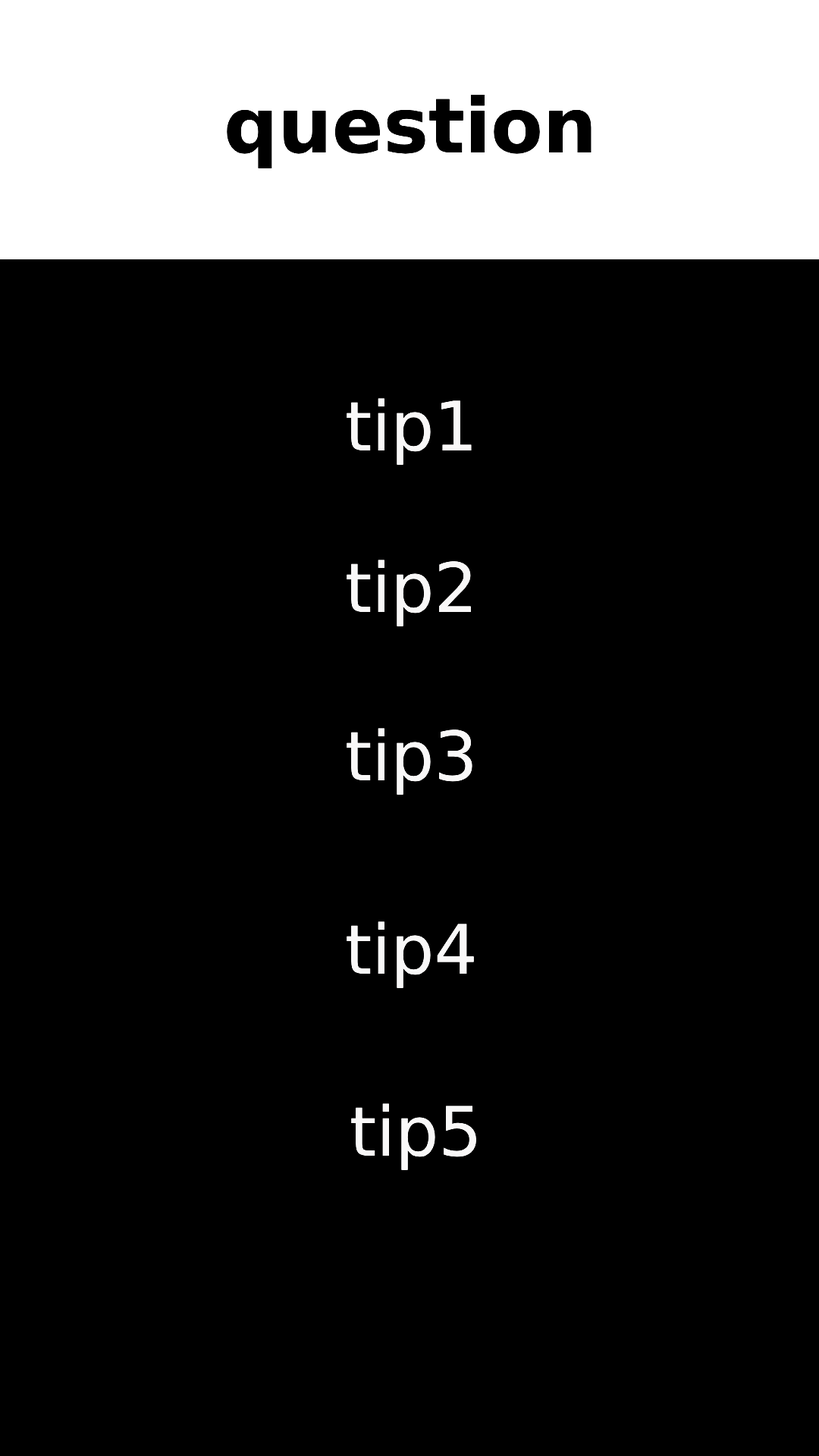
<style>
.page{position:relative;width:819px;height:1456px;background:#000000}
.page>*{position:absolute;margin:0}
.t1{font:75.8px "DejaVuSans-Bold";color:#000000}
.t2{font:68.2px "DejaVuSans";color:#f9f8f8}
</style>
<div class="page">
<p class="t1" style="left:227px;top:95px;width:364px;height:73px">question</p>
<p class="t2" style="left:347px;top:398px;width:125px;height:67px">tip1</p>
<p class="t2" style="left:347px;top:560px;width:124px;height:66px">tip2</p>
<p class="t2" style="left:347px;top:728px;width:125px;height:67px">tip3</p>
<p class="t2" style="left:347px;top:921px;width:127px;height:67px">tip4</p>
<p class="t2" style="left:351px;top:1103px;width:125px;height:67px">tip5</p>
</div>
